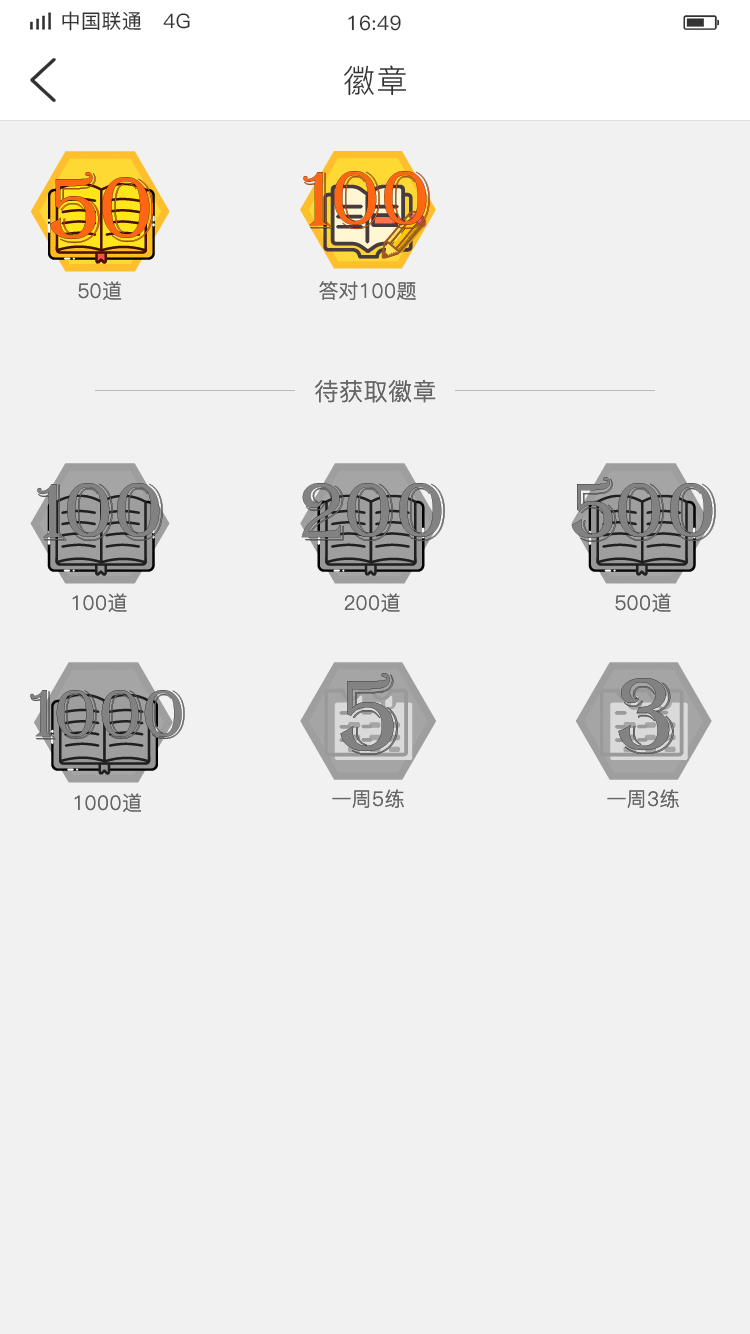
<style>
.page{position:relative;width:750px;height:1334px;background:#f1f1f1}
.page>*{position:absolute;margin:0}
.t1{font:20px "PingFang-SC-Medium";letter-spacing:0.02em;color:#333333}
.t2{font:32px "PingFang-SC-Regular";letter-spacing:0.02em;color:#333333}
.t3{font:20px "PingFang-SC-Regular";letter-spacing:0.02em;color:#666666}
.t4{font:24px "PingFang-SC-Regular";letter-spacing:0.02em;color:#666666}
</style>
<div class="page">
<p class="t1" style="left:62px;top:11px;width:128px;height:20px">中国联通   4G</p>
<p class="t1" style="left:348px;top:15px;width:53px;height:16px">16:49</p>
<p class="t2" style="left:344px;top:65px;width:62px;height:31px">徽章</p>
<p class="t3" style="left:78px;top:281px;width:44px;height:19px">50道</p>
<p class="t3" style="left:319px;top:281px;width:97px;height:19px">答对100题</p>
<p class="t4" style="left:315px;top:379px;width:121px;height:24px">待获取徽章</p>
<p class="t3" style="left:72px;top:593px;width:55px;height:19px">100道</p>
<p class="t3" style="left:344px;top:593px;width:56px;height:19px">200道</p>
<p class="t3" style="left:615px;top:593px;width:56px;height:19px">500道</p>
<p class="t3" style="left:74px;top:793px;width:68px;height:19px">1000道</p>
<p class="t3" style="left:332px;top:789px;width:72px;height:19px">一周5练</p>
<p class="t3" style="left:607px;top:789px;width:72px;height:19px">一周3练</p>
</div>
